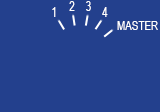
<style>
.page{position:relative;width:160px;height:112px;background:#23408d}
.page>*{position:absolute;margin:0}
.t1{font:12px "ArialNarrow";color:#ffffff}
</style>
<div class="page">
<p class="t1" style="left:69px;top:1px;width:6px;height:10px">2</p>
<p class="t1" style="left:86px;top:1px;width:5px;height:10px">3</p>
<p class="t1" style="left:52px;top:7px;width:4px;height:10px">1</p>
<p class="t1" style="left:102px;top:7px;width:6px;height:10px">4</p>
<p class="t1" style="left:117px;top:21px;width:41px;height:9px">MASTER</p>
</div>
